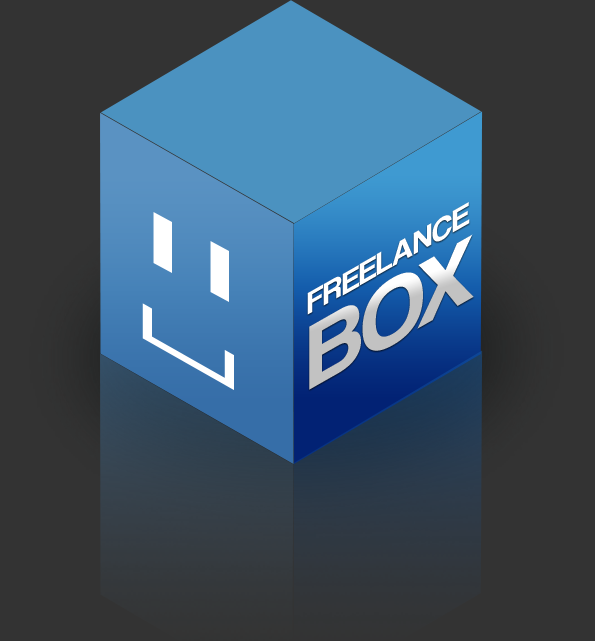
<style>
.page{position:relative;width:595px;height:641px;background:#333333}
.page>*{position:absolute;margin:0}
.t1{font:32.4px/75.9px "CoolveticaRg-Regular";scale:1.15 1}
.t2{font:94.9px/75.9px "CoolveticaRg-Regular";scale:1.15 1}
</style>
<div class="page">
<p class="t1" style="left:307px;top:202px;width:167px;height:188px;rotate:-30deg">FREELANCE<br><span class="t2">BOX</span></p>
</div>
